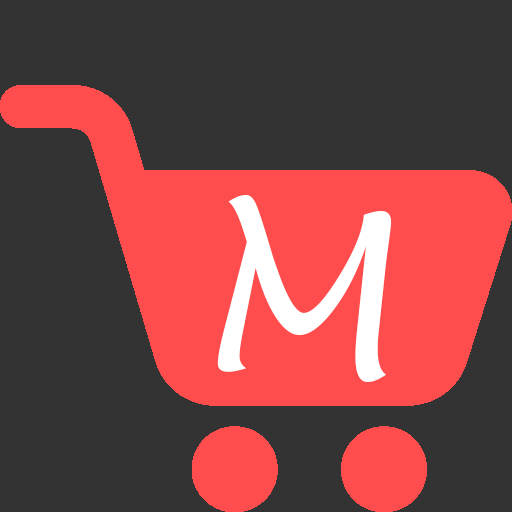
<style>
.page{position:relative;width:512px;height:512px;background:#333333}
.page>*{position:absolute;margin:0}
.t1{font:212px "LucidaHandwriting-Italic";color:#ffffff}
</style>
<div class="page">
<p class="t1" style="left:217px;top:195px;width:175px;height:187px">M</p>
</div>
